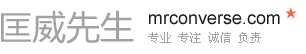
<style>
.page{position:relative;width:306px;height:54px;background:#ffffff}
.page>*{position:absolute;margin:0}
.t1{font:34px "MicrosoftYaHei";color:#a2a2a2}
.t2{font:18px "ArialMT";color:#1a1a1a}
.t3{font:12px "SimSun";color:#a2a2a2}
</style>
<div class="page">
<p class="t1" style="left:1px;top:10px;width:133px;height:34px">匡威先生</p>
<p class="t2" style="left:149px;top:14px;width:131px;height:11px">mrconverse.com</p>
<p class="t3" style="left:148px;top:32px;width:113px;height:11px">专业 专注 诚信 负责</p>
</div>
